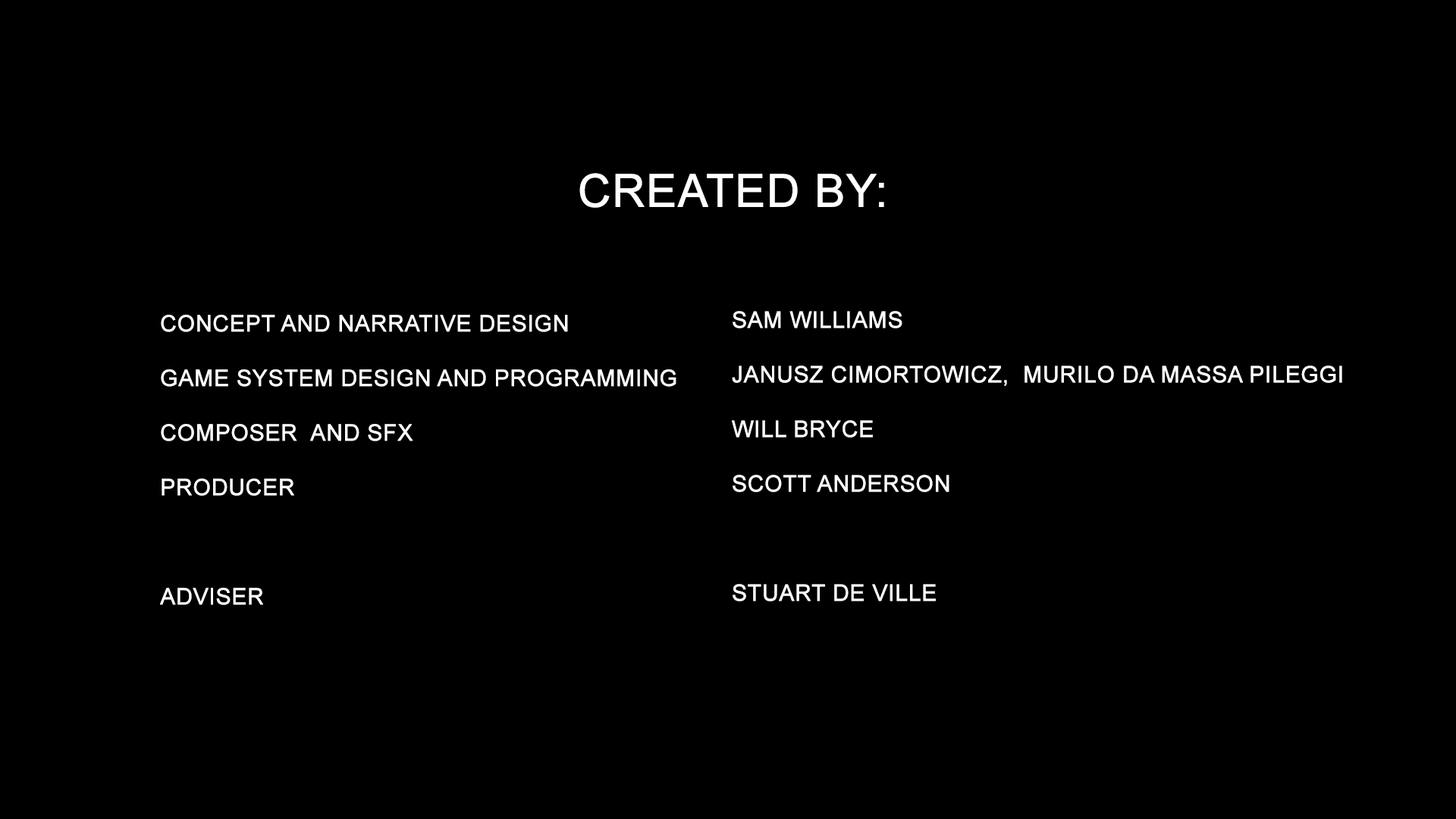
<style>
.page{position:relative;width:1456px;height:819px;background:#000000}
.page>*{position:absolute;margin:0}
.t1{font:45.5px "ArialMT";color:#ffffff;text-transform:uppercase;font-weight:bold}
.t2{font:22.7px "ArialMT";color:#ffffff;text-transform:uppercase;font-weight:bold}
.t3{font:15.2px "MyriadPro-Regular";color:#ffffff;text-transform:uppercase;font-weight:bold}
</style>
<div class="page">
<p class="t1" style="left:579px;top:173px;width:305px;height:35px">Created By:</p>
<p class="t2" style="left:160px;top:315px;width:516px;height:290px"><span class="t3"><br><br></span>Concept and Narrative Design <br><br>Game System design and programming<br><br>Composer  and SFX<br><br>Producer<br><br><br><br>Adviser<br><br><br><br>Adviser</p>
<p class="t2" style="left:732px;top:311px;width:610px;height:290px"><span class="t3"><br><br></span>Sam Williams<br><br>Janusz Cimortowicz,  Murilo dA Massa Pileggi<br><br>Will Bryce<br><br>Scott anderson<br><br><br><br>Stuart De Ville</p>
</div>
